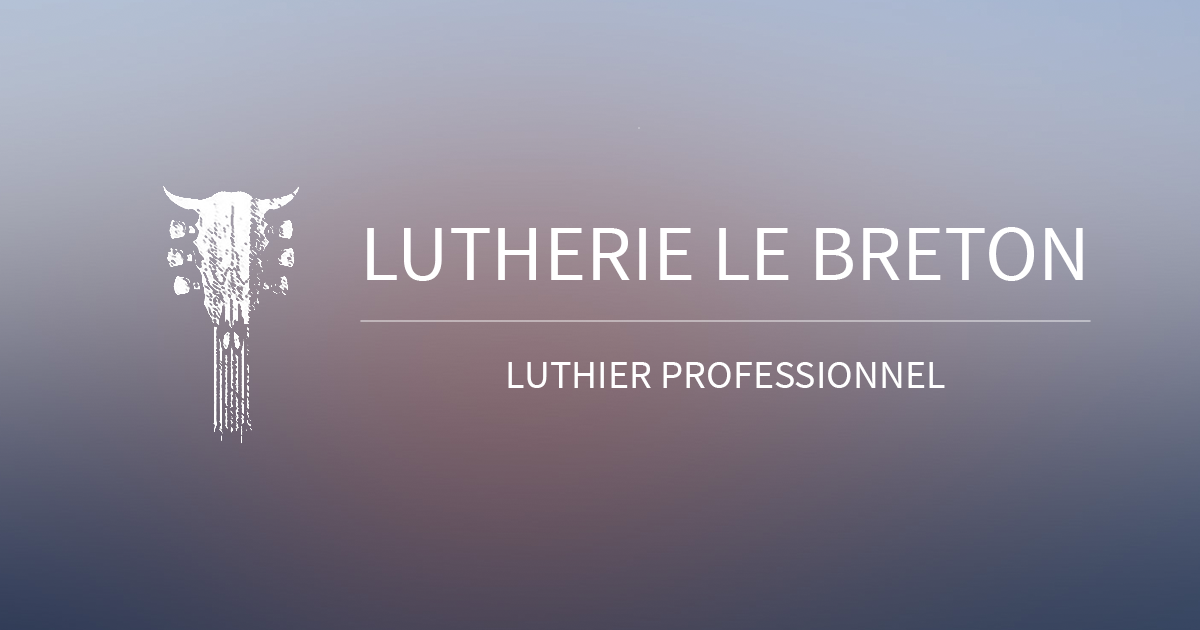
<style>
.page{position:relative;width:1200px;height:630px}
.page>*{position:absolute;margin:0}
.t1{font:80px "SourceSansPro-Regular";color:#ffffff}
.t2{font:40px "SourceSansPro-Regular";color:#ffffff}
</style>
<div class="page">
<p class="t1" style="left:367px;top:227px;width:716px;height:54px">LUTHERIE LE BRETON</p>
<p class="t2" style="left:508px;top:362px;width:437px;height:26px">LUTHIER PROFESSIONNEL</p>
</div>
